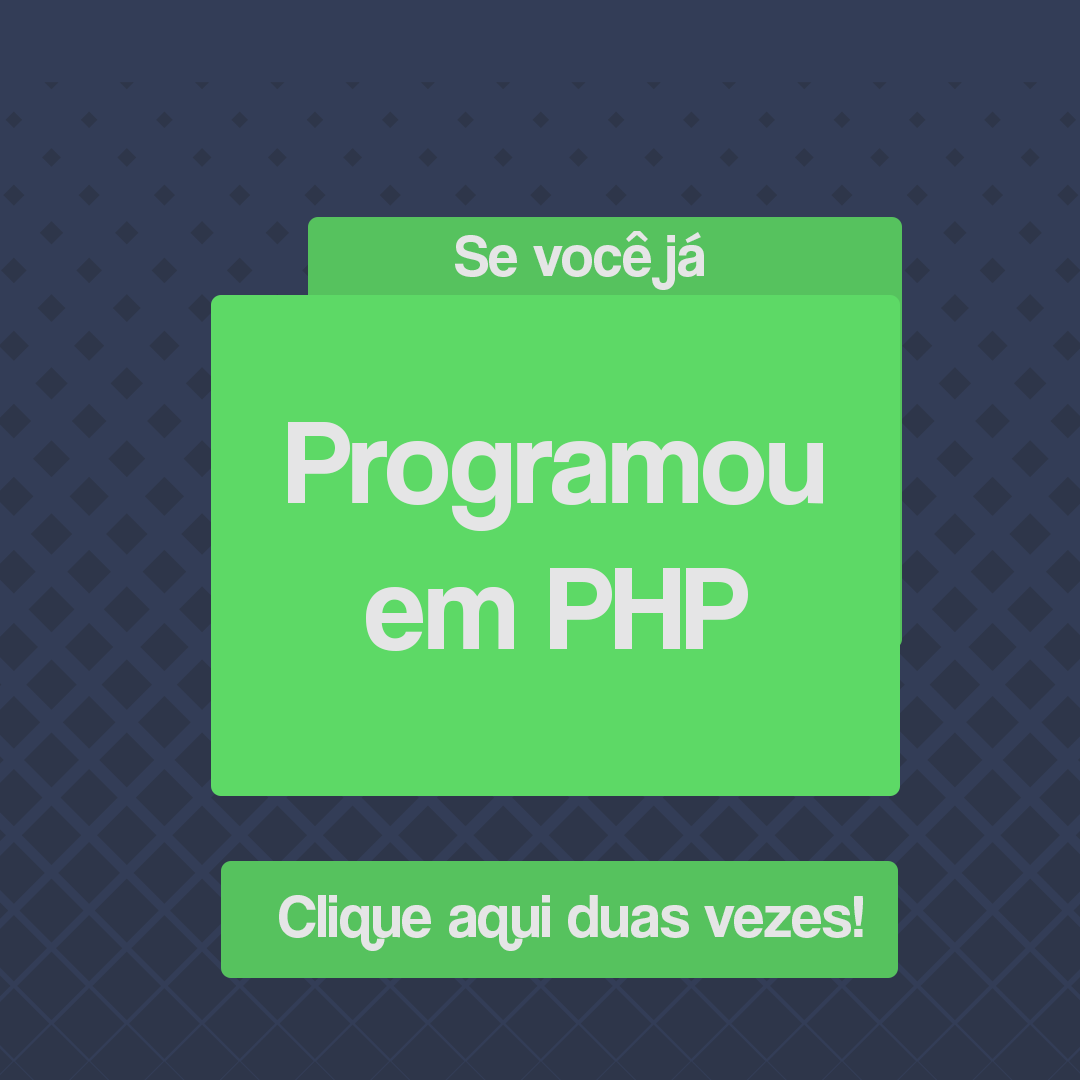
<style>
.page{position:relative;width:1080px;height:1080px;background:#333d57}
.page>*{position:absolute;margin:0}
.t1{font:60px "CoolveticaRg-Regular";color:#e5e5e6}
.t2{font:122px "CoolveticaRg-Regular";color:#e5e5e6}
.t3{font:62px "CoolveticaRg-Regular";color:#e5e5e6}
</style>
<div class="page">
<p class="t1" style="left:455px;top:231px;width:249px;height:59px">Se você já</p>
<p class="t2" style="left:288px;top:422px;width:535px;height:229px;text-align:center">Programou <br>em PHP</p>
<p class="t3" style="left:279px;top:895px;width:584px;height:56px">Clique aqui duas vezes!</p>
</div>
